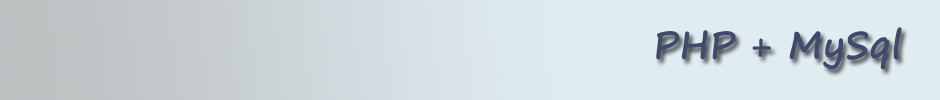
<style>
.page{position:relative;width:940px;height:100px;background:#dfedf1}
.page>*{position:absolute;margin:0}
.t1{font:36px "SegoePrint";color:#424d72;font-weight:bold}
</style>
<div class="page">
<p class="t1" style="left:656px;top:27px;width:246px;height:43px">PHP + MySql</p>
</div>
